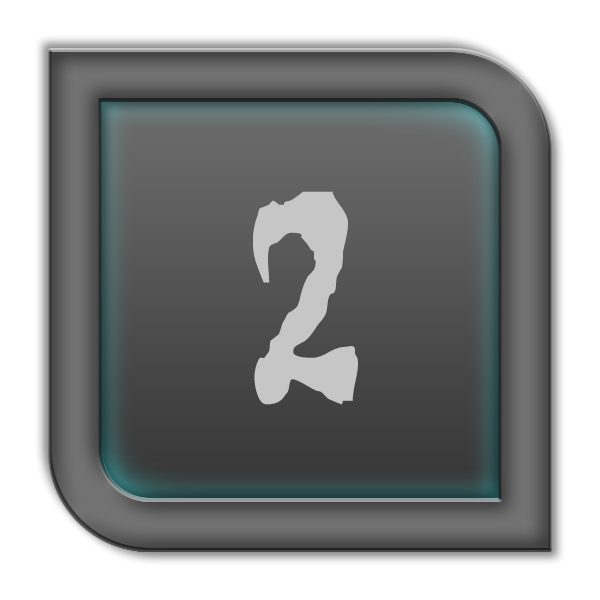
<style>
.page{position:relative;width:600px;height:600px;background:#ffffff}
.page>*{position:absolute;margin:0}
.t1{font:240px "GoreFontII";color:#c6c6c6;scale:0.83 1}
</style>
<div class="page">
<p class="t1" style="left:253px;top:191px;width:105px;height:214px">2</p>
</div>
